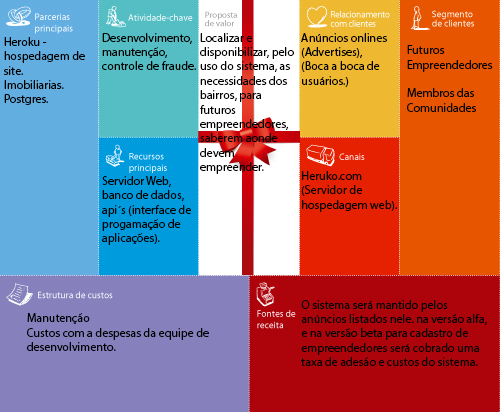
<style>
.page{position:relative;width:500px;height:412px}
.page>*{position:absolute;margin:0}
.t1{font:12px "MyriadPro-Regular";color:#000000}
</style>
<div class="page">
<p class="t1" style="left:3px;top:37px;width:82px;height:68px">Heroku - hospedagem de site.<br>Imobiliarias.<br>Postgres.</p>
<p class="t1" style="left:102px;top:33px;width:94px;height:37px">Desenvolvimento, manutenção, controle de fraude.</p>
<p class="t1" style="left:200px;top:33px;width:94px;height:141px">Localizar e disponibilizar, pelo uso do sistema, as necessidades dos bairros, para futuros empreendedores, saberem aonde devem empreender.</p>
<p class="t1" style="left:301px;top:33px;width:86px;height:54px">Anúncios onlines<br>(Advertises),<br>(Boca a boca de usuários.)</p>
<p class="t1" style="left:407px;top:45px;width:86px;height:67px">Futuros <br>Empreendedores<br><br>Membros das<br>Comunidades</p>
<p class="t1" style="left:301px;top:171px;width:96px;height:41px">Heruko.com (Servidor de hospedagem web).</p>
<p class="t1" style="left:102px;top:176px;width:89px;height:69px">Servidor Web,<br>banco de dados, api´s (interface de progamação de aplicações).</p>
<p class="t1" style="left:301px;top:300px;width:186px;height:66px">O sistema será mantido pelos anúncios listados nele. na versão alfa, e na versão beta para cadastro de empreendedores será cobrado uma taxa de adesão e custos do sistema.</p>
<p class="t1" style="left:27px;top:313px;width:182px;height:38px">Manutenção<br>Custos com a despesas da equipe de desenvolvimento.</p>
</div>
